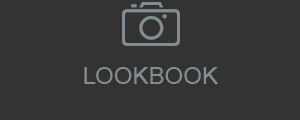
<style>
.page{position:relative;width:300px;height:120px;background:#333333}
.page>*{position:absolute;margin:0}
.t1{font:24px "ArialMT";color:#838e92;text-transform:uppercase}
</style>
<div class="page">
<p class="t1" style="left:84px;top:67px;width:134px;height:17px">LOOKBOOK</p>
</div>
